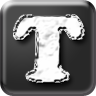
<style>
.page{position:relative;width:96px;height:96px}
.page>*{position:absolute;margin:0}
.t1{font:99px "CooperBlack";color:#ffffff}
</style>
<div class="page">
<p class="t1" style="left:14px;top:15px;width:70px;height:68px">T</p>
</div>
